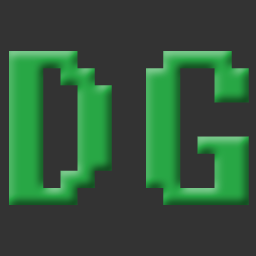
<style>
.page{position:relative;width:256px;height:256px;background:#333333}
.page>*{position:absolute;margin:0}
.t1{font:218.9px "Fixedsys"}
</style>
<div class="page">
<p class="t1" style="left:9px;top:51px;width:240px;height:154px">DG</p>
</div>
